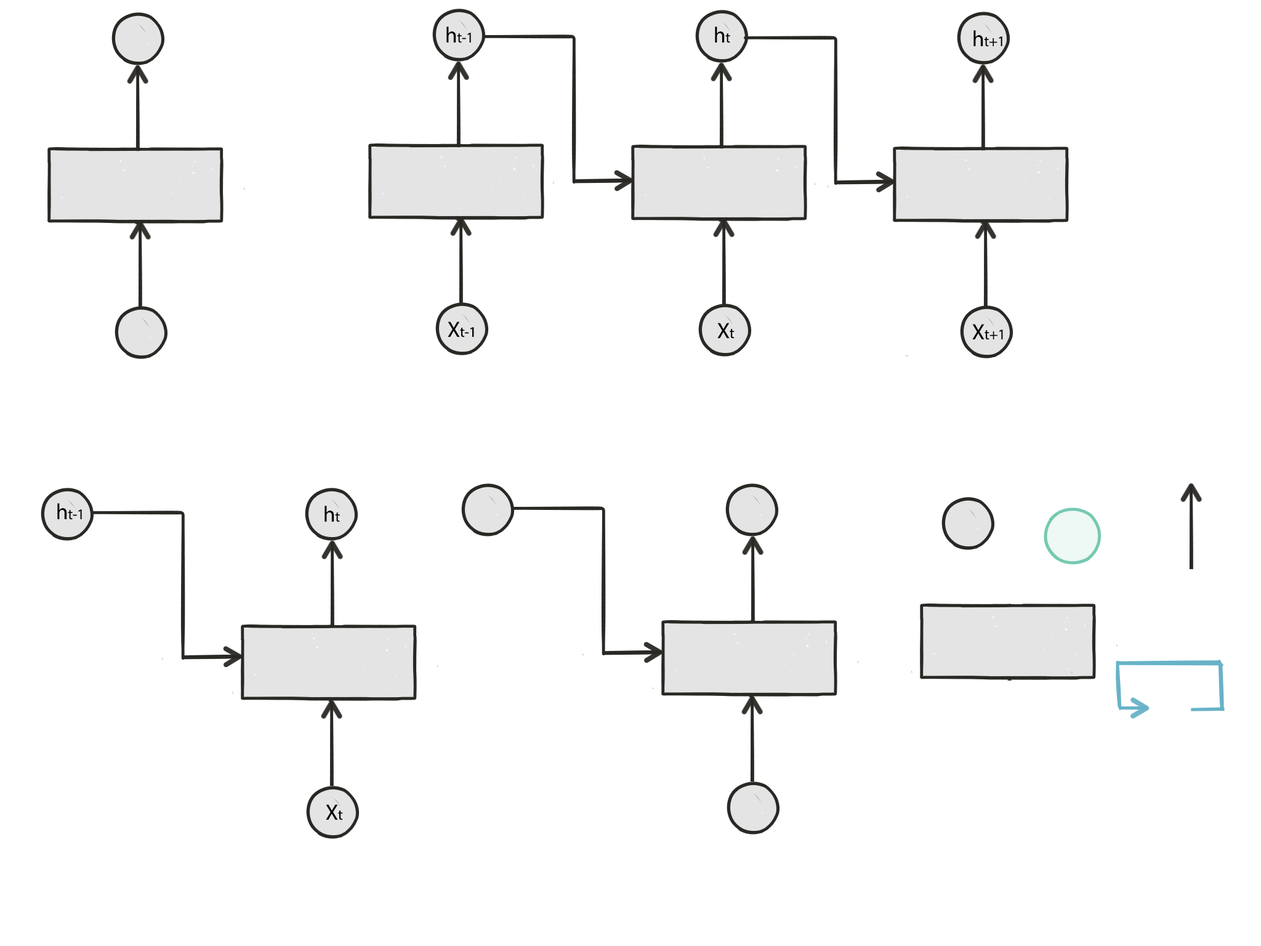
<style>
.page{position:relative;width:1261px;height:946px;background:#ffffff}
.page>*{position:absolute;margin:0}
.t1{font:14.8px "MyriadPro-Regular";letter-spacing:-0.01em;color:#000000}
.t2{font:22.2px "MyriadPro-Regular";letter-spacing:-0.01em;color:#000000}
</style>
<div class="page">
<p class="t1" style="left:446px;top:26px;width:25px;height:17px"><span class="t2">h</span>t-1</p>
<p class="t2" style="left:715px;top:26px;width:15px;height:17px">h<span class="t1">t</span></p>
<p class="t1" style="left:973px;top:30px;width:29px;height:17px"><span class="t2">h</span>t+1</p>
<p class="t1" style="left:448px;top:321px;width:26px;height:16px"><span class="t2">X</span>t-1</p>
<p class="t2" style="left:717px;top:323px;width:18px;height:16px">X<span class="t1">t</span></p>
<p class="t1" style="left:972px;top:324px;width:31px;height:16px"><span class="t2">X</span>t+1</p>
<p class="t1" style="left:57px;top:503px;width:25px;height:17px"><span class="t2">h</span>t-1</p>
<p class="t2" style="left:324px;top:505px;width:16px;height:17px">h<span class="t1">t</span></p>
<p class="t2" style="left:326px;top:804px;width:17px;height:16px">X<span class="t1">t</span></p>
</div>
